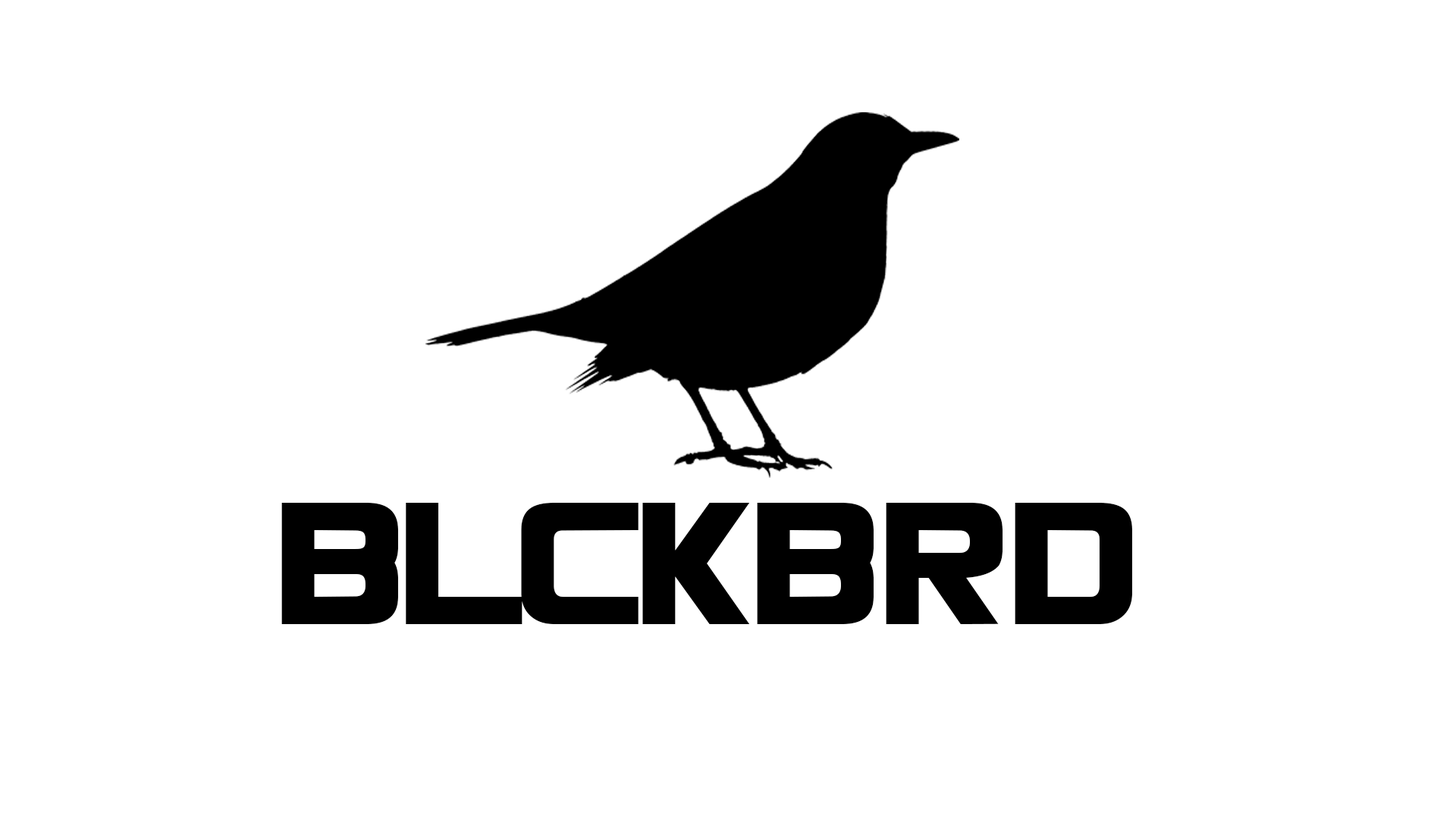
<style>
.page{position:relative;width:1456px;height:819px;background:#ffffff}
.page>*{position:absolute;margin:0}
.t1{font:151.7px "DieHundNormal";color:#000000}
</style>
<div class="page">
<p class="t1" style="left:281px;top:503px;width:851px;height:121px">BLCKBRD</p>
</div>
